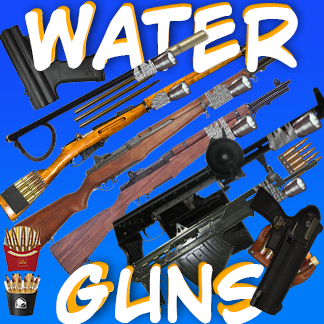
<style>
.page{position:relative;width:324px;height:324px}
.page>*{position:absolute;margin:0}
.t1{font:77.3px "Wild-Words-Bold-Bold";color:#ffffff}
.t2{font:71.9px "Wild-Words-Bold-Bold";color:#ffffff}
</style>
<div class="page">
<p class="t1" style="left:25px;top:3px;width:273px;height:70px">WATER</p>
<p class="t2" style="left:56px;top:264px;width:220px;height:61px">GUNS</p>
</div>
